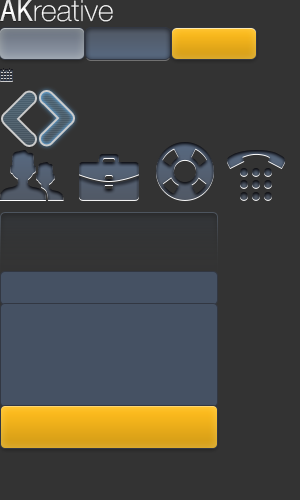
<style>
.page{position:relative;width:300px;height:500px;background:#333333}
.page>*{position:absolute;margin:0}
.t1{font:30px "Helvetica35-Thin";color:#ffffff}
.t2{font:30px "Helvetica-Narrow";color:#ffffff}
</style>
<div class="page">
<p class="t1" style="left:0px;top:0px;width:113px;height:22px"><span class="t2">AK</span>reative</p>
</div>
